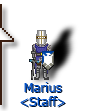
<style>
.page{position:relative;width:92px;height:111px;background:#ffffff}
.page>*{position:absolute;margin:0}
.t1{font:11.5px "MSReferenceSansSerif";color:#0050c8}
.t2{font:11.5px "MSReferenceSansSerif"}
</style>
<div class="page">
<p class="t1" style="left:20px;top:82px;width:45px;height:25px;text-align:center">Marius<br>&lt;Staff&gt;</p>
<p class="t2" style="left:21px;top:83px;width:45px;height:25px;text-align:center">Marius<br>&lt;Staff&gt;</p>
</div>
